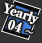
<style>
.page{position:relative;width:42px;height:43px;background:#333333}
.page>*{position:absolute;margin:0}
.t1{font:13px/14px "RyuminPro-ExBold";letter-spacing:-0.08em;color:#ffffff;font-weight:bold}
.t2{font:13px/14px "RyuminPro-ExBold";color:#ffffff;font-weight:bold}
.t3{font:13px/14px "TimesNewRomanPSMT";color:#ffffff;font-weight:bold}
</style>
<div class="page">
<p class="t1" style="left:3px;top:2px;width:36px;height:32px;text-align:center;rotate:19deg">Yearly<br><span class="t2">  04 </span><span class="t3">~</span></p>
</div>
